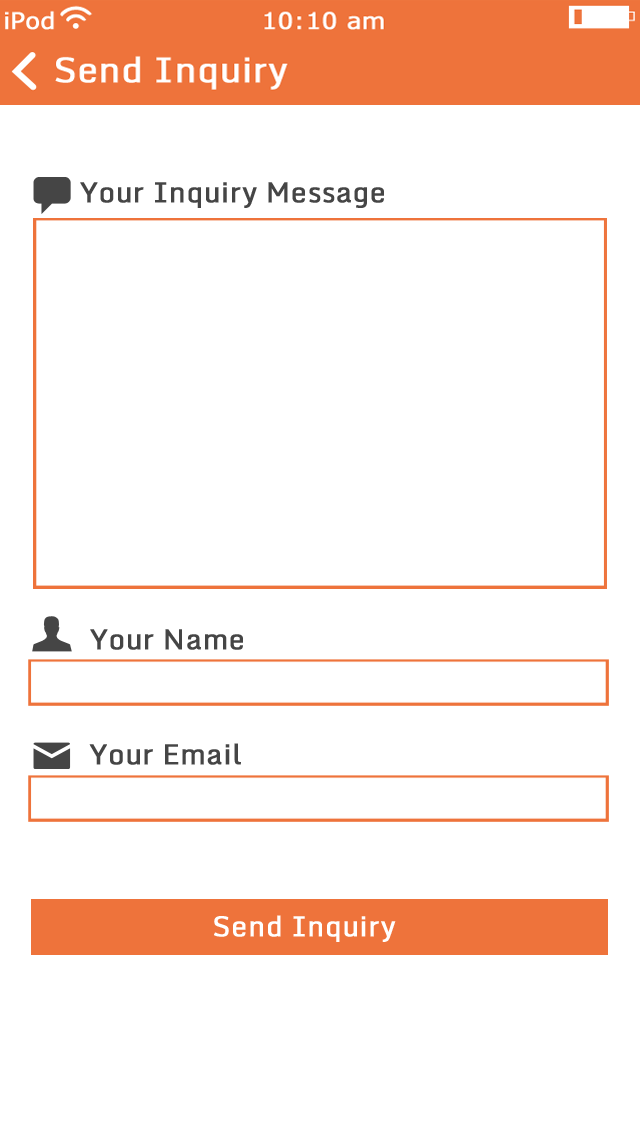
<style>
.page{position:relative;width:640px;height:1136px;background:#ffffff}
.page>*{position:absolute;margin:0}
.t1{font:28px "Monda-Regular";color:#454545;font-weight:bold}
.t2{font:28px "Monda-Regular";color:#ffffff;font-weight:bold}
</style>
<div class="page">
<p class="t1" style="left:80px;top:182px;width:304px;height:26px">Your Inquiry Message</p>
<p class="t1" style="left:90px;top:629px;width:153px;height:21px">Your Name</p>
<p class="t1" style="left:89px;top:743px;width:152px;height:22px">Your Email</p>
<p class="t2" style="left:214px;top:915px;width:182px;height:27px">Send Inquiry</p>
</div>
